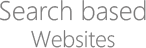
<style>
.page{position:relative;width:146px;height:48px;background:#ffffff}
.page>*{position:absolute;margin:0}
.t1{font:26.6px "SegoeWPN-Light";color:#7b7a7a}
.t2{font:22.6px "SegoeWPN-Light";color:#7b7a7a}
</style>
<div class="page">
<p class="t1" style="left:0px;top:0px;width:146px;height:48px;text-align:center">Search based<br><span class="t2">Websites</span></p>
</div>
